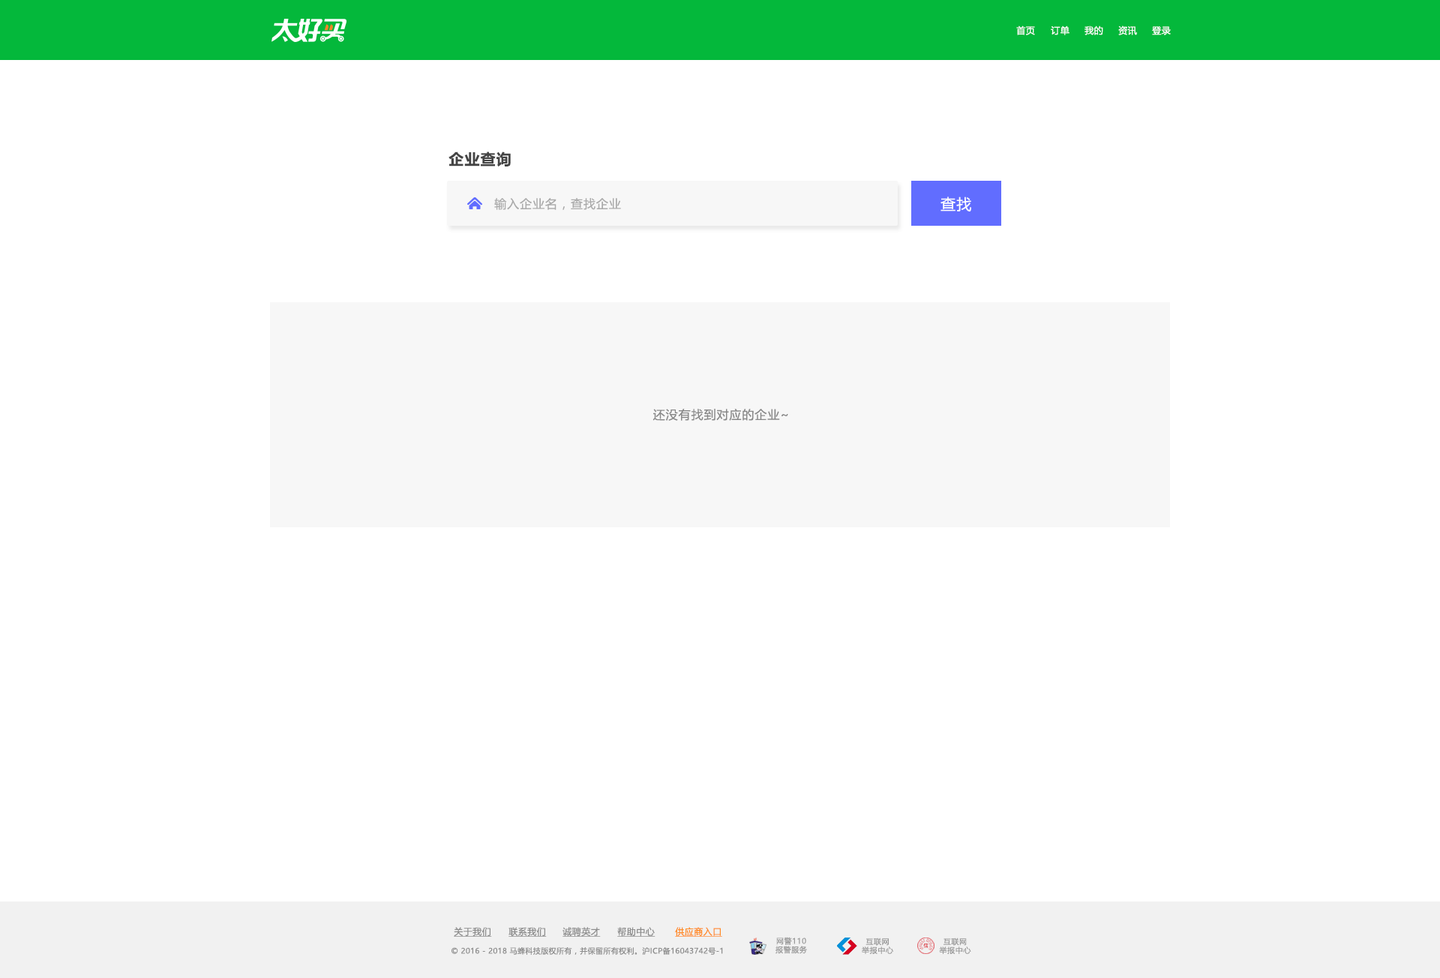
<style>
.page{position:relative;width:1440px;height:978px;background:#ffffff}
.page>*{position:absolute;margin:0}
.t1{font:9px "MicrosoftYaHeiUI";letter-spacing:0.04em;color:#ffffff}
.t2{font:15px "MicrosoftYaHeiUI-Bold";letter-spacing:0.06em;color:#444444}
.t3{font:12px "MicrosoftYaHeiUI";letter-spacing:0.06em;color:#aaaaaa}
.t4{font:15px "MicrosoftYaHeiUI";letter-spacing:0.06em;color:#ffffff}
.t5{font:12px "MicrosoftYaHeiUI";letter-spacing:0.06em;color:#888888}
.t6{font:9px "MicrosoftYaHeiUI";letter-spacing:0.04em;color:#8c8c8c;text-decoration:underline}
.t7{font:9px "MicrosoftYaHeiUI";letter-spacing:0.04em;color:#ff8b25;text-decoration:underline}
.t8{font:7.5px/8.7px "MicrosoftYaHei";letter-spacing:0.06em;color:#999999}
.t9{font:7.5px "MicrosoftYaHeiUI";letter-spacing:0.04em;color:#8c8c8c}
</style>
<div class="page">
<p class="t1" style="left:1016px;top:26px;width:19px;height:9px">首页</p>
<p class="t1" style="left:1051px;top:26px;width:19px;height:9px">订单</p>
<p class="t1" style="left:1084px;top:26px;width:19px;height:9px">我的</p>
<p class="t1" style="left:1118px;top:26px;width:19px;height:9px">资讯</p>
<p class="t1" style="left:1152px;top:26px;width:19px;height:9px">登录</p>
<p class="t2" style="left:448px;top:152px;width:63px;height:14px">企业查询</p>
<p class="t3" style="left:494px;top:198px;width:127px;height:12px">输入企业名，查找企业</p>
<p class="t4" style="left:940px;top:196px;width:31px;height:16px">查找</p>
<p class="t5" style="left:652px;top:409px;width:136px;height:12px">还没有找到对应的企业~</p>
<p class="t6" style="left:454px;top:927px;width:38px;height:10px">关于我们</p>
<p class="t6" style="left:508px;top:927px;width:39px;height:10px">联系我们</p>
<p class="t6" style="left:562px;top:927px;width:39px;height:10px">诚聘英才</p>
<p class="t6" style="left:617px;top:927px;width:39px;height:10px">帮助中心</p>
<p class="t7" style="left:675px;top:927px;width:47px;height:10px">供应商入口</p>
<p class="t8" style="left:776px;top:937px;width:31px;height:17px;text-align:center">网警110<br>报警服务</p>
<p class="t8" style="left:862px;top:938px;width:31px;height:16px;text-align:center">互联网<br>举报中心</p>
<p class="t8" style="left:939px;top:938px;width:32px;height:16px;text-align:center">互联网<br>举报中心</p>
<p class="t9" style="left:452px;top:946px;width:271px;height:9px">© 2016 - 2018 马蜂科技版权所有，并保留所有权利。沪ICP备16043742号-1</p>
</div>
